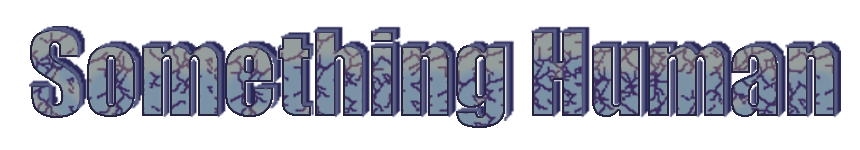
<style>
.page{position:relative;width:860px;height:150px;background:#ffffff}
.page>*{position:absolute;margin:0}
.t1{font:107.7px "Impact"}
</style>
<div class="page">
<p class="t1" style="left:30px;top:29px;width:805px;height:99px">Something Human</p>
</div>
